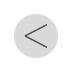
<style>
.page{position:relative;width:71px;height:71px;background:#ffffff}
.page>*{position:absolute;margin:0}
.t1{font:52px "S-CoreDream-1Thin";color:#494949}
</style>
<div class="page">
<p class="t1" style="left:24px;top:24px;width:23px;height:24px">&lt;</p>
</div>
